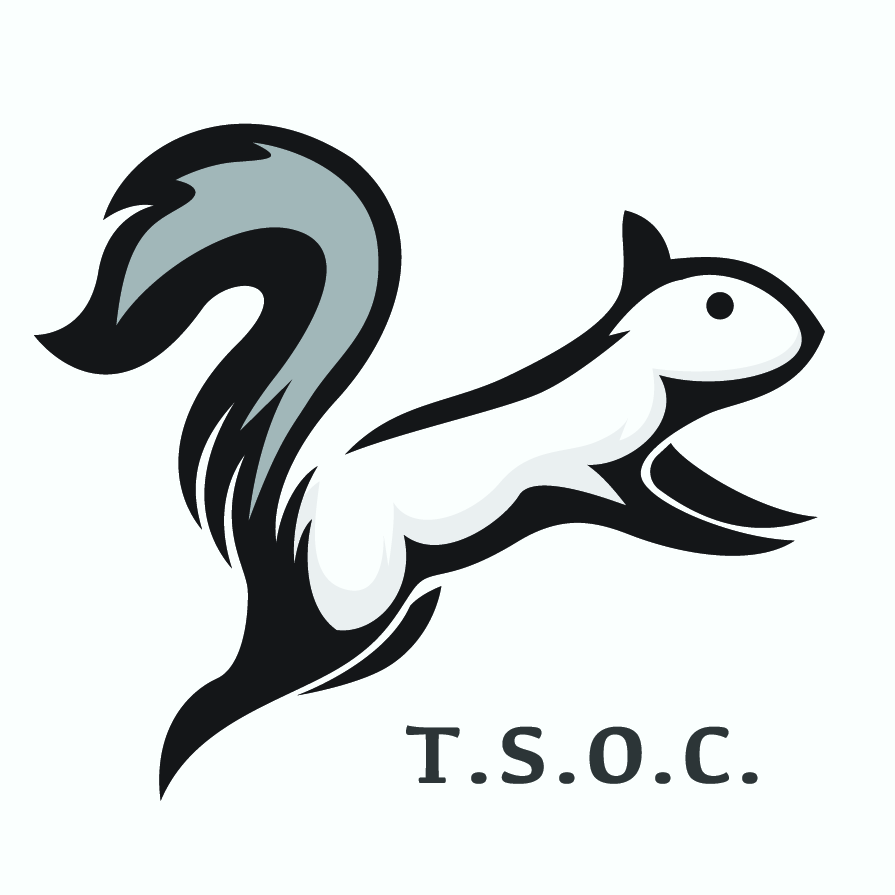
<style>
.page{position:relative;width:895px;height:895px;background:#fafffe}
.page>*{position:absolute;margin:0}
.t1{font:83.3px "Kefa-Bold";color:#2c3637}
</style>
<div class="page">
<p class="t1" style="left:406px;top:725px;width:352px;height:59px">T.S.O.C.</p>
</div>
